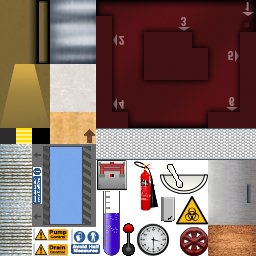
<style>
.page{position:relative;width:256px;height:256px}
.page>*{position:absolute;margin:0}
.t1{font:11px "MS-Gothic";letter-spacing:-0.01em;color:#937b7b;font-weight:bold}
.t2{font:11px "MS-Gothic";letter-spacing:-0.01em;color:#a27c7f;font-weight:bold}
.t3{font:11px "MS-Gothic";letter-spacing:-0.01em;color:#a37c7f;font-weight:bold}
.t4{font:11px "MS-Gothic";letter-spacing:-0.01em;font-weight:bold}
.t5{font:11px "MS-Gothic";letter-spacing:-0.01em;color:#997c7d;font-weight:bold}
.t6{font:3.5px/4.1px "Helvetica-Bold";letter-spacing:-0.01em;color:#000000;font-weight:bold;scale:1.17 1}
.t7{font:5.2px/4.1px "Helvetica-Bold";color:#000000;font-weight:bold;scale:1.17 1}
.t8{font:4.3px/4.1px "Helvetica-Bold";color:#ffffff;font-weight:bold;scale:1.17 1}
</style>
<div class="page">
<p class="t1" style="left:245px;top:2px;width:4px;height:9px">1</p>
<p class="t2" style="left:181px;top:17px;width:5px;height:9px">3</p>
<p class="t3" style="left:119px;top:36px;width:6px;height:9px">2</p>
<p class="t4" style="left:228px;top:51px;width:5px;height:9px">5</p>
<p class="t5" style="left:118px;top:100px;width:7px;height:9px">4</p>
<p class="t2" style="left:229px;top:97px;width:6px;height:9px">6</p>
<p class="t6" style="left:49px;top:230px;width:18px;height:9px;text-align:center"><span class="t7">Pump<br></span>Control</p>
<p class="t6" style="left:49px;top:245px;width:17px;height:9px;text-align:center"><span class="t7">Drain<br></span>Control</p>
<p class="t8" style="left:72px;top:244px;width:27px;height:9px;text-align:center">Avoid Half<br>Measures</p>
</div>
